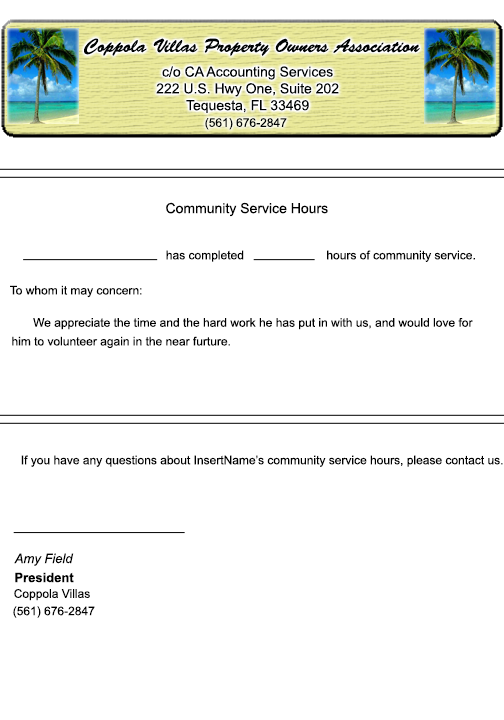
<style>
.page{position:relative;width:504px;height:720px;background:#ffffff}
.page>*{position:absolute;margin:0}
.t1{font:19px "BrushScriptStd";color:#000303}
.t2{font:14px "ArialMT";color:#000303}
.t3{font:12px "ArialMT";color:#000303}
.t4{font:14px "ArialMT";color:#000000}
.t5{font:12px "ArialMT";color:#000000}
.t6{font:13px "Arial-ItalicMT";color:#000000}
.t7{font:13px "Arial-BoldMT";color:#000000}
</style>
<div class="page">
<p class="t1" style="left:84px;top:38px;width:336px;height:18px">Coppola Villas Property Owners Association</p>
<p class="t2" style="left:156px;top:66px;width:183px;height:47px;text-align:center">c/o CA Accounting Services<br>222 U.S. Hwy One, Suite 202<br>Tequesta, FL 33469</p>
<p class="t3" style="left:205px;top:118px;width:82px;height:12px">(561) 676-2847</p>
<p class="t4" style="left:166px;top:202px;width:162px;height:15px">Community Service Hours</p>
<p class="t5" style="left:166px;top:250px;width:78px;height:12px">has completed</p>
<p class="t5" style="left:327px;top:250px;width:148px;height:12px">hours of community service.</p>
<p class="t5" style="left:10px;top:285px;width:132px;height:13px">To whom it may concern:</p>
<p class="t5" style="left:33px;top:318px;width:440px;height:12px">We appreciate the time and the hard work he has put in with us, and would love for</p>
<p class="t5" style="left:12px;top:336px;width:218px;height:13px">him to volunteer again in the near furture.</p>
<p class="t5" style="left:21px;top:455px;width:482px;height:12px">If you have any questions about InsertName’s community service hours, please contact us.</p>
<p class="t6" style="left:14px;top:553px;width:60px;height:13px">Amy Field</p>
<p class="t7" style="left:15px;top:572px;width:59px;height:11px">President</p>
<p class="t5" style="left:14px;top:589px;width:76px;height:12px">Coppola Villas</p>
<p class="t5" style="left:13px;top:606px;width:82px;height:12px">(561) 676-2847</p>
</div>
